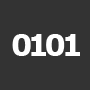
<style>
.page{position:relative;width:90px;height:90px;background:#333333}
.page>*{position:absolute;margin:0}
.t1{font:30px "Verdana-Bold";letter-spacing:-0.15em;color:#ffffff}
</style>
<div class="page">
<p class="t1" style="left:12px;top:34px;width:68px;height:22px">0101</p>
</div>
